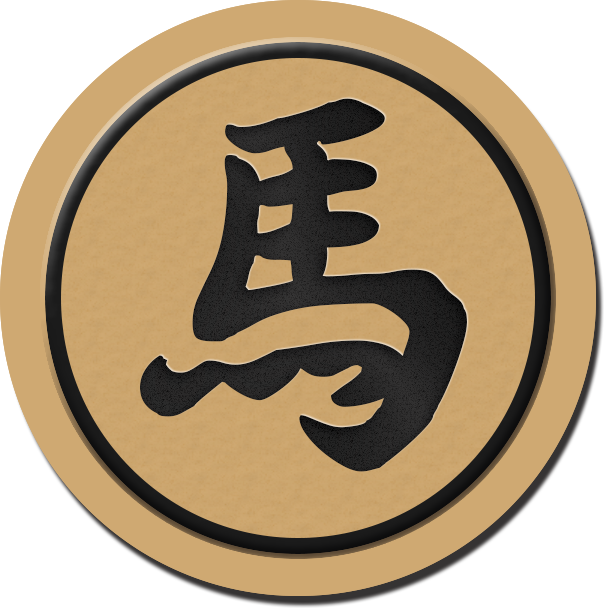
<style>
.page{position:relative;width:604px;height:608px;background:#ffffff}
.page>*{position:absolute;margin:0}
.t1{font:416.7px "AaYuwenlaoshidezi";letter-spacing:0.04em;color:#1b1b1b}
</style>
<div class="page">
<p class="t1" style="left:140px;top:98px;width:327px;height:374px">馬</p>
<p class="t1" style="left:140px;top:98px;width:327px;height:374px">馬</p>
<p class="t1" style="left:140px;top:98px;width:327px;height:374px">馬</p>
<p class="t1" style="left:140px;top:98px;width:327px;height:374px">馬</p>
<p class="t1" style="left:140px;top:98px;width:327px;height:374px">馬</p>
</div>
